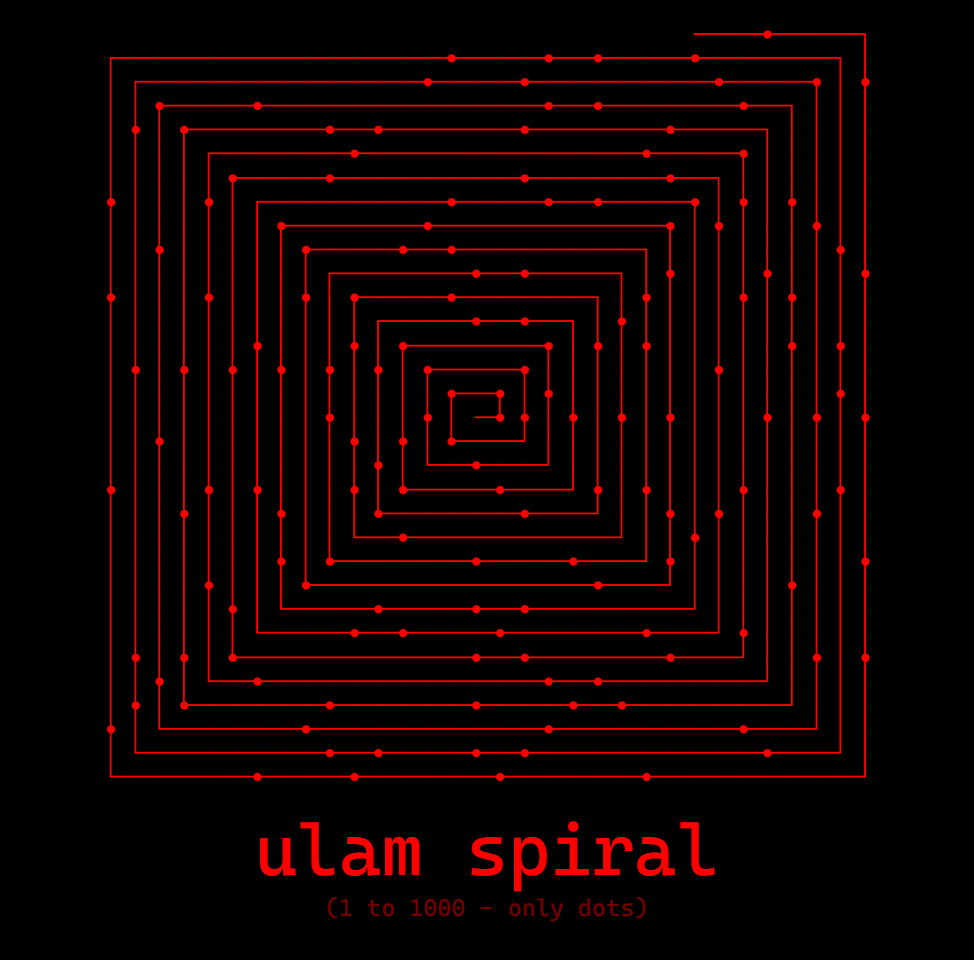
<style>
.page{position:relative;width:974px;height:960px;background:#000000}
.page>*{position:absolute;margin:0}
.t1{font:24px "CascadiaMono-Roman";color:#730000}
.t2{font:72px "CascadiaMono-Roman";color:#ff0000}
</style>
<div class="page">
<p class="t1" style="left:260px;top:821px;width:455px;height:101px;text-align:center"><span class="t2">ulam spiral <br><br></span>(1 to 1000 - only dots)</p>
</div>
